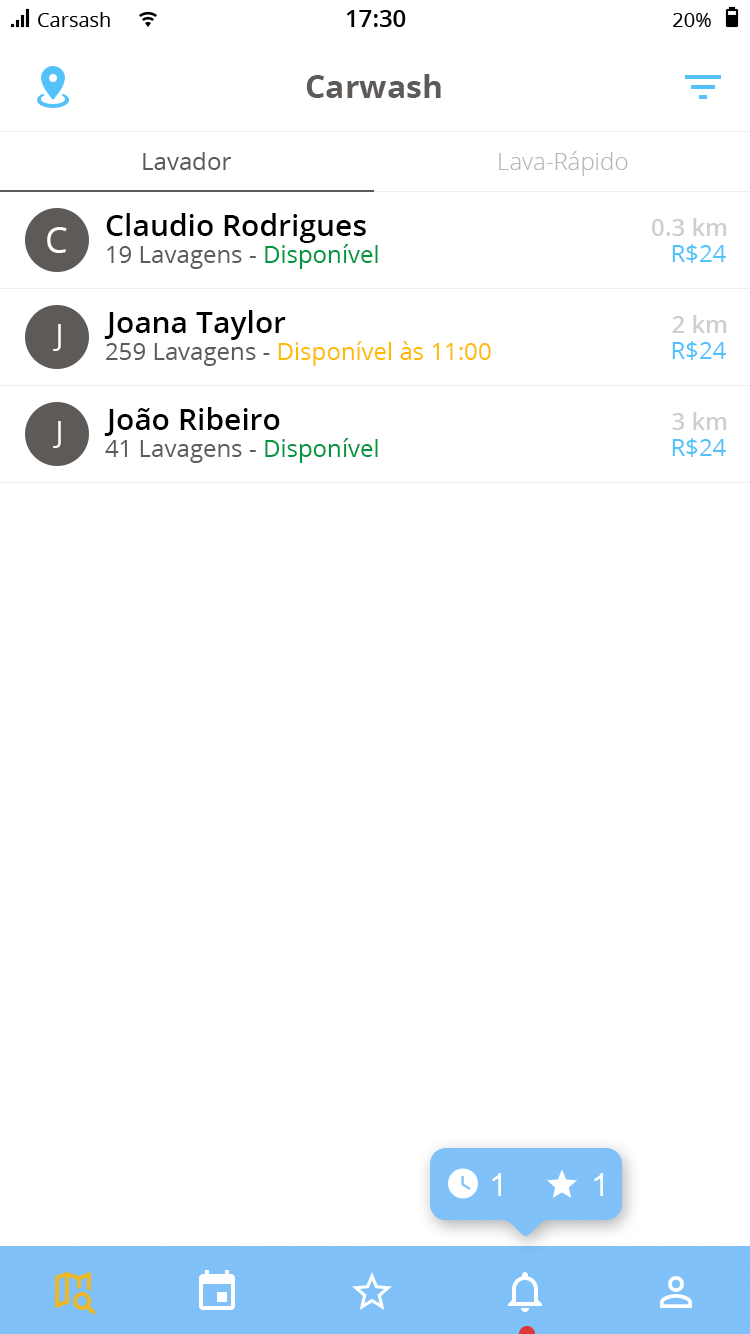
<style>
.page{position:relative;width:750px;height:1334px;background:#ffffff}
.page>*{position:absolute;margin:0}
.t1{font:32px "OpenSans-Bold";color:#5d5a58}
.t2{font:24px "OpenSans";color:#5d5a58}
.t3{font:24px "OpenSans-Light";color:#b7b6b6}
.t4{font:30px "OpenSans-Semibold";color:#000000}
.t5{font:24px "OpenSans-Semibold";color:#cfcecd}
.t6{font:36px "OpenSans";color:#ffffff}
.t7{font:24px "OpenSans";color:#5d5d5d}
.t8{font:24px "OpenSans";color:#009640}
.t9{font:24px "OpenSans";color:#53c2fa}
.t10{font:30px "OpenSans";color:#ffffff}
.t11{font:24px "OpenSans";color:#ffb900}
</style>
<div class="page">
<p class="t1" style="left:306px;top:74px;width:135px;height:24px">Carwash</p>
<p class="t2" style="left:143px;top:152px;width:88px;height:18px">Lavador</p>
<p class="t3" style="left:499px;top:151px;width:129px;height:25px">Lava-Rápido</p>
<p class="t4" style="left:106px;top:213px;width:260px;height:30px">Claudio Rodrigues</p>
<p class="t5" style="left:652px;top:218px;width:75px;height:18px">0.3 km</p>
<p class="t6" style="left:47px;top:227px;width:20px;height:26px">C</p>
<p class="t7" style="left:107px;top:244px;width:271px;height:25px"><span class="t2">19 </span>Lavagens - <span class="t8">Disponível</span></p>
<p class="t9" style="left:672px;top:244px;width:54px;height:19px">R$24</p>
<p class="t4" style="left:104px;top:310px;width:182px;height:30px">Joana Taylor</p>
<p class="t5" style="left:672px;top:315px;width:55px;height:18px">2 km</p>
<p class="t10" style="left:53px;top:324px;width:8px;height:27px">J</p>
<p class="t11" style="left:106px;top:341px;width:385px;height:25px"><span class="t2">259 </span><span class="t7">Lavagens - </span>Disponível às 11:00</p>
<p class="t9" style="left:672px;top:341px;width:54px;height:19px">R$24</p>
<p class="t4" style="left:104px;top:407px;width:176px;height:29px">João Ribeiro</p>
<p class="t5" style="left:672px;top:412px;width:55px;height:18px">3 km</p>
<p class="t10" style="left:53px;top:421px;width:8px;height:27px">J</p>
<p class="t7" style="left:105px;top:438px;width:273px;height:25px"><span class="t2">41 </span>Lavagens - <span class="t8">Disponível</span></p>
<p class="t9" style="left:672px;top:438px;width:54px;height:19px">R$24</p>
</div>
